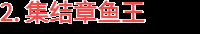
<style>
.page{position:relative;width:200px;height:34px;background:#000000}
.page>*{position:absolute;margin:0}
.t1{font:24px "WebPSD-18463539-0-Regular";color:#ef4b4b;font-weight:bold}
</style>
<div class="page">
<p class="t1" style="left:0px;top:0px;width:200px;height:34px">2. 集结章鱼王</p>
</div>
